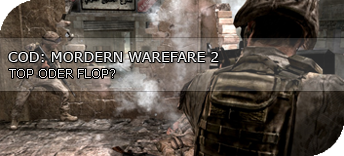
<style>
.page{position:relative;width:344px;height:156px}
.page>*{position:absolute;margin:0}
.t1{font:14px "Verdana";color:#ffffff}
.t2{font:12px "Verdana";color:#e5e3e3}
</style>
<div class="page">
<p class="t1" style="left:8px;top:52px;width:211px;height:10px">COD: MORDERN WAREFARE 2</p>
<p class="t2" style="left:9px;top:69px;width:106px;height:9px">TOP ODER FLOP?</p>
</div>
